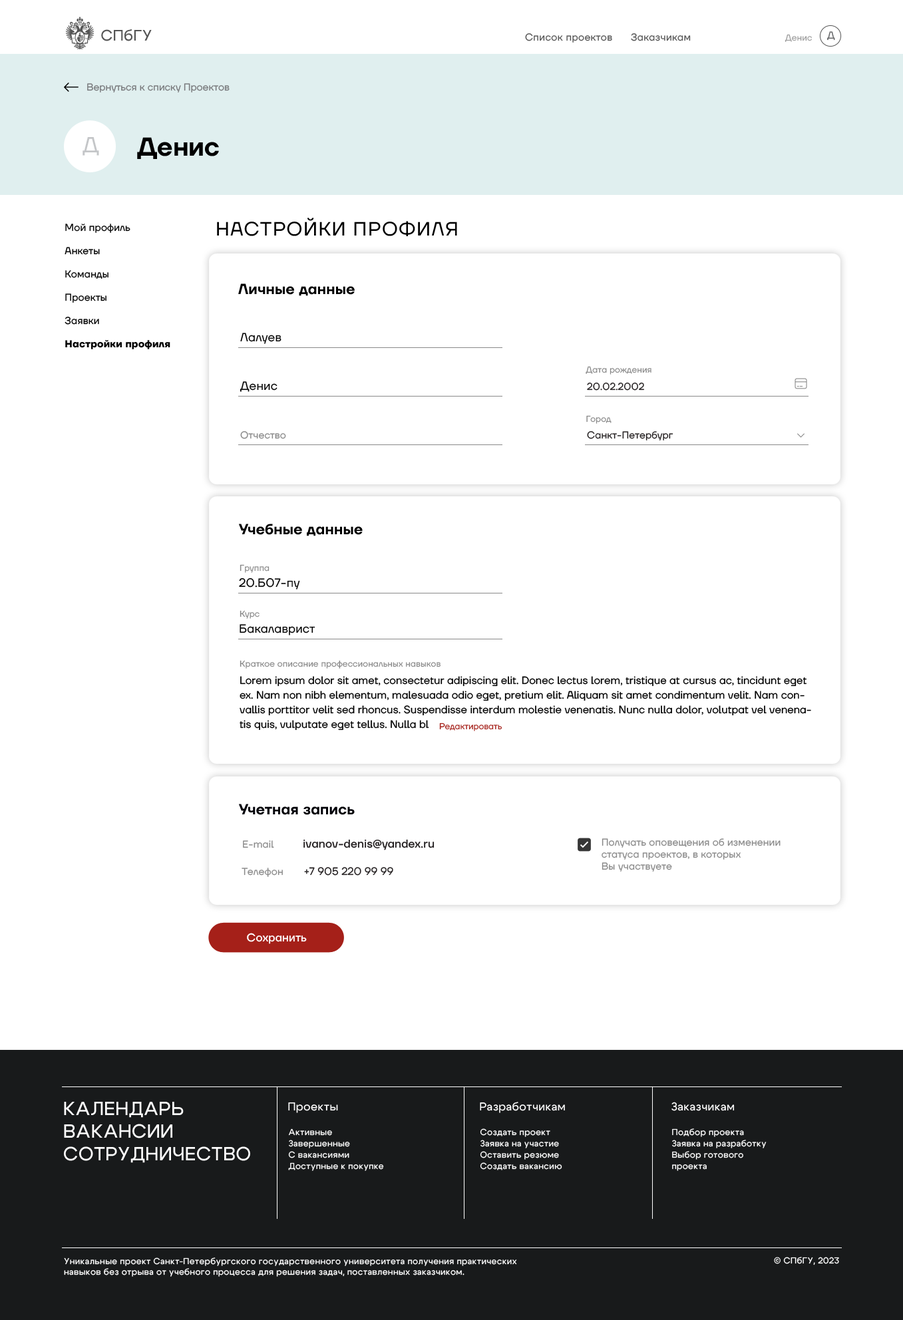
<style>
.page{position:relative;width:903px;height:1320px;background:#ffffff}
.page>*{position:absolute;margin:0}
.t1{font:15.1px "Cygre-Medium";letter-spacing:0.025em;color:#555555}
.t2{font:10px "TTFirsNeue-Regular";letter-spacing:0.025em;color:#555555}
.t3{font:8.7px "TTFirsNeue-Regular";letter-spacing:0.01em;color:#9c9c9c}
.t4{font:10px "TTFirsNeue-Regular";color:#636466}
.t5{font:10px "TTFirsNeue-Regular";color:#77787b}
.t6{font:22px "TTFirsNeue-Regular";color:#c4c6c8}
.t7{font:26px "TTFirsNeue-DemiBold";color:#000000}
.t8{font:19.3px "TTFirsNeue-Regular";letter-spacing:0.05em;color:#000000}
.t9{font:11.3px "TTFirsNeue-Medium";letter-spacing:0.01em;color:#000000}
.t10{font:10px/23.3px "TTFirsNeue-Regular";letter-spacing:0.013em;color:#000000}
.t11{font:10px/23.3px "TTFirsNeue-Bold";letter-spacing:0.013em;color:#000000}
.t12{font:14.6px "TTFirsNeue-DemiBold";letter-spacing:0.01em;color:#000000}
.t13{font:12px "TTFirsNeue-Regular";letter-spacing:0.01em;color:#000000}
.t14{font:8.7px "TTFirsNeue-Regular";letter-spacing:0.01em;color:#898989}
.t15{font:10px "TTFirsNeue-Regular";letter-spacing:0.01em;color:#231f20}
.t16{font:10px "TTFirsNeue-Regular";letter-spacing:0.01em;color:#898989}
.t17{font:10.6px/14.6px "TTFirsNeue-Regular";color:#000000}
.t18{font:8.7px "TTFirsNeue-Regular";color:#a52019}
.t19{font:14.6px "TTFirsNeue-DemiBold";letter-spacing:0.01em;color:#000007}
.t20{font:11.3px "TTFirsNeue-Medium";letter-spacing:0.01em;color:#231f20}
.t21{font:10.6px "TTFirsNeue-Regular";color:#231f20}
.t22{font:11.3px "TTFirsNeue-Medium";letter-spacing:0.01em;color:#ffffff}
.t23{font:18.9px "Cygre-Medium";letter-spacing:0.025em;color:#ffffff}
.t24{font:11.3px "Cygre-Medium";letter-spacing:0.025em;color:#ffffff}
.t25{font:8.7px/11.3px "Cygre-Medium";letter-spacing:0.025em;color:#ffffff}
.t26{font:8.7px "Cygre-Medium";letter-spacing:0.025em;color:#ffffff}
</style>
<div class="page">
<p class="t1" style="left:101px;top:29px;width:51px;height:12px">СПбГУ</p>
<p class="t2" style="left:525px;top:33px;width:166px;height:10px">Список проектов      Заказчикам</p>
<p class="t3" style="left:785px;top:34px;width:27px;height:8px">Денис</p>
<p class="t4" style="left:827px;top:31px;width:8px;height:10px">Д</p>
<p class="t5" style="left:87px;top:83px;width:143px;height:10px">Вернуться к списку Проектов</p>
<p class="t6" style="left:83px;top:137px;width:16px;height:19px">Д</p>
<p class="t7" style="left:137px;top:137px;width:82px;height:22px">Денис</p>
<p class="t8" style="left:217px;top:218px;width:240px;height:18px"><span class="t9"> </span>НАСТРОЙКИ ПРОФИЛЯ</p>
<p class="t10" style="left:65px;top:224px;width:105px;height:125px">Мой профиль<br>Анкеты<br>Команды<br>Проекты<br>Заявки<br><span class="t11">Настройки профиля</span></p>
<p class="t12" style="left:238px;top:284px;width:117px;height:12px">Личные данные</p>
<p class="t13" style="left:240px;top:333px;width:42px;height:11px">Лалуев</p>
<p class="t14" style="left:586px;top:366px;width:66px;height:9px">Дата рождения</p>
<p class="t13" style="left:240px;top:381px;width:38px;height:11px">Денис</p>
<p class="t15" style="left:587px;top:383px;width:57px;height:8px">20.02.2002</p>
<p class="t14" style="left:586px;top:415px;width:26px;height:9px">Город</p>
<p class="t16" style="left:240px;top:431px;width:46px;height:8px">Отчество</p>
<p class="t15" style="left:587px;top:431px;width:86px;height:10px">Санкт-Петербург</p>
<p class="t12" style="left:239px;top:524px;width:124px;height:12px">Учебные данные</p>
<p class="t14" style="left:240px;top:564px;width:30px;height:9px">Группа</p>
<p class="t13" style="left:239px;top:578px;width:61px;height:12px">20.Б07-пу</p>
<p class="t14" style="left:240px;top:610px;width:20px;height:9px">Курс</p>
<p class="t13" style="left:240px;top:624px;width:75px;height:12px">Бакалаврист</p>
<p class="t14" style="left:240px;top:660px;width:201px;height:9px">Краткое описание профессиональных навыков</p>
<p class="t17" style="left:240px;top:676px;width:571px;height:55px">Lorem ipsum dolor sit amet, consectetur adipiscing elit. Donec lectus lorem, tristique at cursus ac, tincidunt eget ex. Nam non nibh elementum, malesuada odio eget, pretium elit. Aliquam sit amet condimentum velit. Nam convallis porttitor velit sed rhoncus. Suspendisse interdum molestie venenatis. Nunc nulla dolor, volutpat vel venenatis quis, vulputate eget tellus. Nulla bl</p>
<p class="t18" style="left:439px;top:723px;width:63px;height:8px">Редактировать</p>
<p class="t19" style="left:239px;top:804px;width:116px;height:11px">Учетная запись</p>
<p class="t16" style="left:243px;top:841px;width:31px;height:8px">E-mail</p>
<p class="t20" style="left:303px;top:839px;width:132px;height:12px">ivanov-denis@yandex.ru</p>
<p class="t16" style="left:602px;top:839px;width:179px;height:33px">Получать оповещения об изменении<br>статуса проектов, в которых<br>Вы участвуете</p>
<p class="t16" style="left:242px;top:868px;width:41px;height:9px">Телефон</p>
<p class="t21" style="left:304px;top:867px;width:89px;height:9px">+7 905 220 99 99</p>
<p class="t22" style="left:247px;top:933px;width:60px;height:11px">Сохранить</p>
<p class="t23" style="left:64px;top:1102px;width:186px;height:61px">КАЛЕНДАРЬ<br>ВАКАНСИИ<br>СОТРУДНИЧЕСТВО</p>
<p class="t24" style="left:288px;top:1102px;width:50px;height:11px">Проекты</p>
<p class="t24" style="left:480px;top:1102px;width:85px;height:11px">Разработчикам</p>
<p class="t24" style="left:672px;top:1102px;width:63px;height:9px">Заказчикам</p>
<p class="t25" style="left:288px;top:1129px;width:96px;height:42px">Активные<br>Завершенные<br>С вакансиями<br>Доступные к покупке</p>
<p class="t25" style="left:480px;top:1129px;width:82px;height:42px">Создать проект<br>Заявка на участие<br>Оставить резюме<br>Создать вакансию</p>
<p class="t25" style="left:672px;top:1129px;width:95px;height:42px">Подбор проекта<br>Заявка на разработку<br>Выбор готового<br>проекта</p>
<p class="t26" style="left:64px;top:1258px;width:453px;height:19px">Уникальные проект Санкт-Петербургского государственного университета получения практических навыков без отрыва от учебного процесса для решения задач, поставленных заказчиком.</p>
<p class="t26" style="left:774px;top:1257px;width:65px;height:9px">© СПбГУ, 2023</p>
</div>
